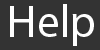
<style>
.page{position:relative;width:100px;height:50px;background:#333333}
.page>*{position:absolute;margin:0}
.t1{font:45.7px "MyriadPro-Regular";color:#fefefe}
</style>
<div class="page">
<p class="t1" style="left:10px;top:4px;width:84px;height:42px">Help</p>
</div>
